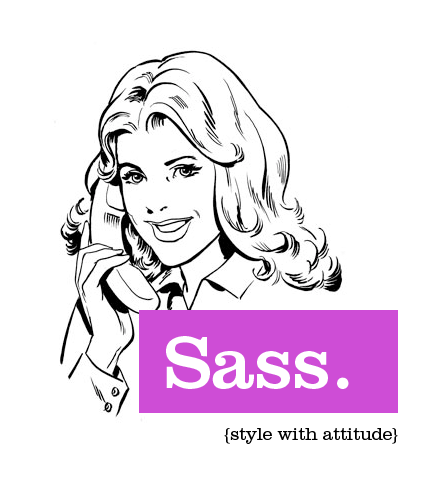
<style>
.page{position:relative;width:432px;height:504px;background:#ffffff}
.page>*{position:absolute;margin:0}
.t1{font:77px "ClarendonLTStd";color:#ffffff}
.t2{font:18px "ClarendonLTStd-Light";color:#000000}
</style>
<div class="page">
<p class="t1" style="left:166px;top:336px;width:183px;height:53px">Sass.</p>
<p class="t2" style="left:224px;top:428px;width:174px;height:16px">{style with attitude}</p>
</div>
